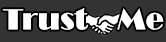
<style>
.page{position:relative;width:166px;height:42px;background:#333333}
.page>*{position:absolute;margin:0}
.t1{font:30px "Broadway";color:#ffffff}
</style>
<div class="page">
<p class="t1" style="left:2px;top:8px;width:162px;height:22px">Trust    Me</p>
</div>
